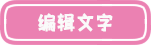
<style>
.page{position:relative;width:151px;height:45px;background:#eb81b2}
.page>*{position:absolute;margin:0}
.t1{font:12px "shetumodengxiaofangti";color:#fafafa;font-weight:bold;scale:0.94 1}
</style>
<div class="page">
<p class="t1" style="left:38px;top:13px;width:75px;height:19px">编辑文字</p>
</div>
